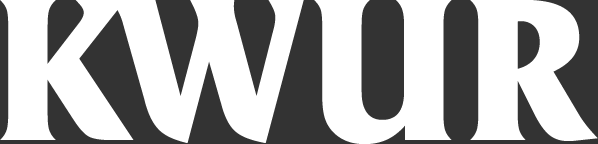
<style>
.page{position:relative;width:598px;height:144px;background:#ffffff}
.page>*{position:absolute;margin:0}
.t1{font:206.3px "FrizQuadrataITCbyBT-Bold";color:#ffffff}
</style>
<div class="page">
<p class="t1" style="left:0px;top:0px;width:598px;height:144px">KWUR</p>
</div>
